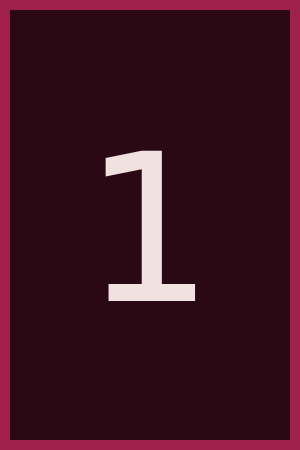
<style>
.page{position:relative;width:300px;height:450px;background:#2a0914}
.page>*{position:absolute;margin:0}
.t1{font:206px "DejaVuSans";color:#f2e1e1}
</style>
<div class="page">
<p class="t1" style="left:105px;top:150px;width:91px;height:151px">1</p>
</div>
